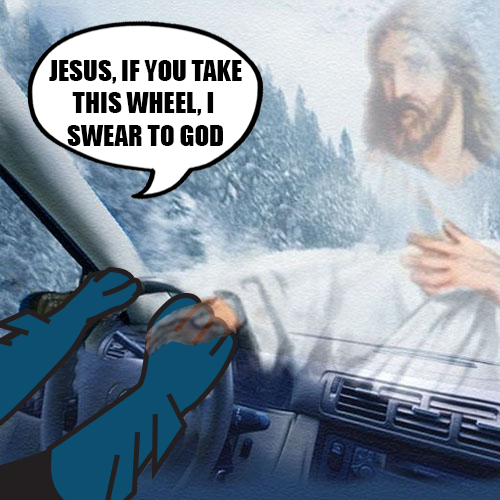
<style>
.page{position:relative;width:500px;height:500px}
.page>*{position:absolute;margin:0}
.t1{font:27.1px "Impact";color:#000000}
</style>
<div class="page">
<p class="t1" style="left:49px;top:60px;width:193px;height:86px;text-align:center">JESUS, IF YOU TAKE<br>THIS WHEEL, I <br>SWEAR TO GOD</p>
</div>
